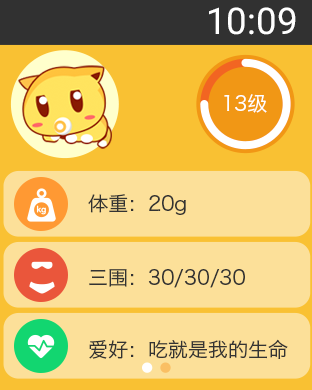
<style>
.page{position:relative;width:312px;height:390px;background:#fce099}
.page>*{position:absolute;margin:0}
.t1{font:36.7px "Roboto-Regular";color:#ffffff}
.t2{font:20px "HiraginoSansGB-W3";color:#ffffff}
.t3{font:20px "HiraginoSansGB-W3";color:#333333}
</style>
<div class="page">
<p class="t1" style="left:209px;top:7px;width:87px;height:28px">10:09</p>
<p class="t2" style="left:224px;top:94px;width:43px;height:19px">13级</p>
<p class="t3" style="left:88px;top:194px;width:98px;height:21px">体重：20g</p>
<p class="t3" style="left:89px;top:269px;width:156px;height:19px">三围：30/30/30</p>
<p class="t3" style="left:89px;top:339px;width:199px;height:20px">爱好：吃就是我的生命</p>
</div>
